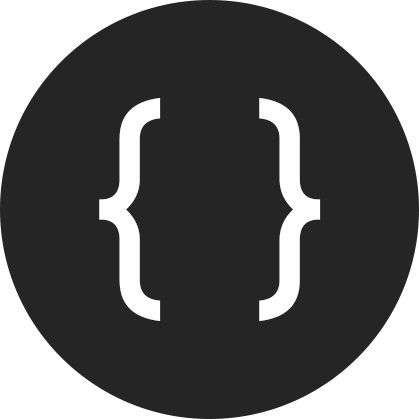
<style>
.page{position:relative;width:419px;height:419px;background:#252525}
.page>*{position:absolute;margin:0}
.t1{font:243.2px "Krungthep";color:#ffffff}
</style>
<div class="page">
<p class="t1" style="left:99px;top:98px;width:222px;height:223px">{ }</p>
</div>
